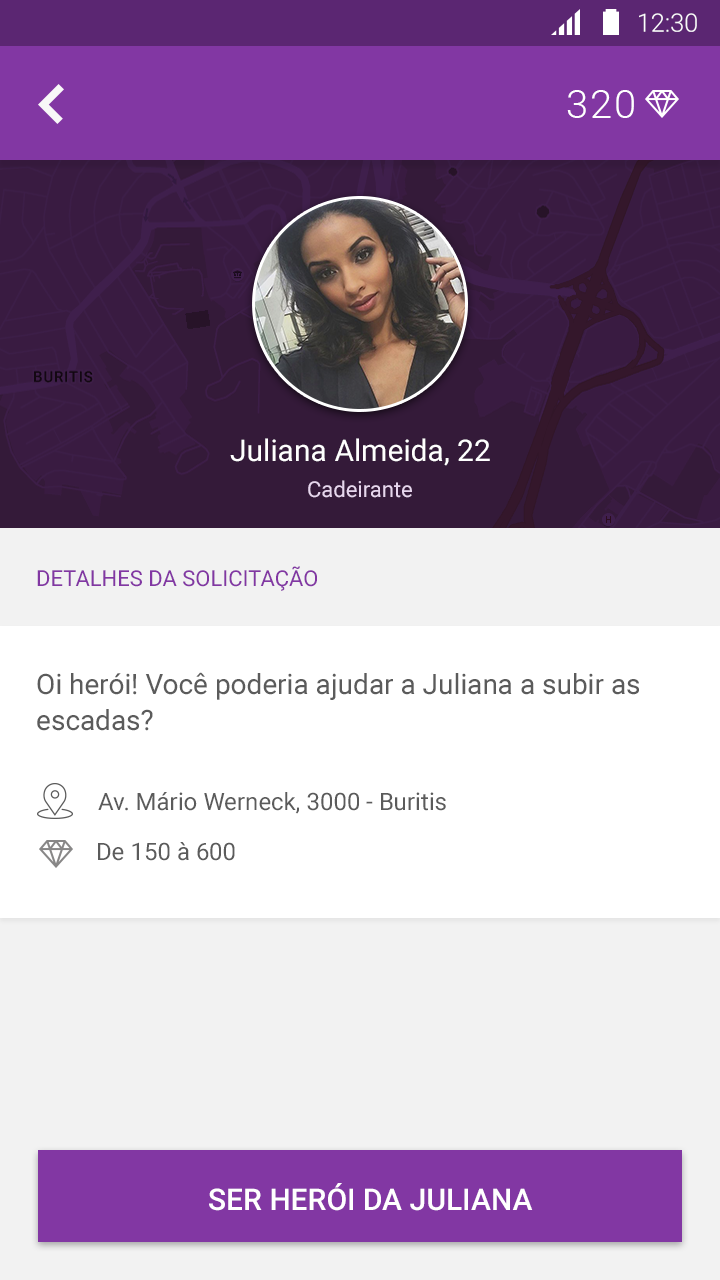
<style>
.page{position:relative;width:720px;height:1280px;background:#f2f2f2}
.page>*{position:absolute;margin:0}
.t1{font:25.4px "Roboto-Light";color:#ffffff}
.t2{font:40px "Roboto-Light";letter-spacing:0.05em;color:#ffffff}
.t3{font:30px "Roboto-Regular";color:#ffffff}
.t4{font:22px "Roboto-Regular";color:#e7d6ee}
.t5{font:22px "Roboto-Regular";color:#8237a3}
.t6{font:28px/36px "Roboto-Regular";color:#5b5b5b}
.t7{font:24px "Roboto-Regular";color:#5b5b5b}
.t8{font:30px "Roboto-Medium";color:#ffffff}
</style>
<div class="page">
<p class="t1" style="left:639px;top:13px;width:58px;height:19px">12:30</p>
<p class="t2" style="left:567px;top:90px;width:67px;height:28px">320</p>
<p class="t3" style="left:230px;top:438px;width:260px;height:28px">Juliana Almeida, 22</p>
<p class="t4" style="left:308px;top:480px;width:104px;height:18px">Cadeirante</p>
<p class="t5" style="left:37px;top:566px;width:280px;height:25px">DETALHES DA SOLICITAÇÃO</p>
<p class="t6" style="left:37px;top:672px;width:602px;height:59px">Oi herói! Você poderia ajudar a Juliana a subir as <br>escadas?</p>
<p class="t7" style="left:98px;top:792px;width:348px;height:22px">Av. Mário Werneck, 3000 - Buritis</p>
<p class="t7" style="left:98px;top:842px;width:137px;height:19px">De 150 à 600</p>
<p class="t8" style="left:209px;top:1183px;width:324px;height:28px">SER HERÓI DA JULIANA</p>
</div>
